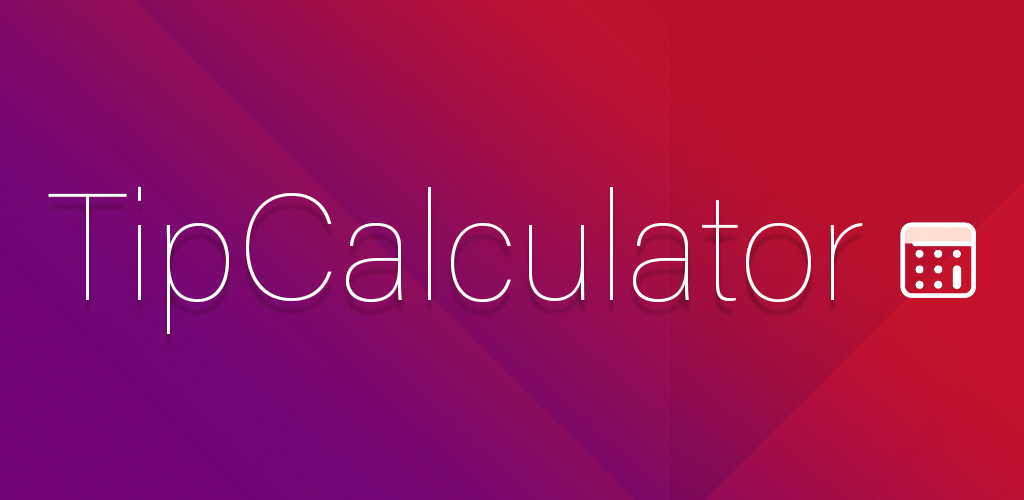
<style>
.page{position:relative;width:1024px;height:500px}
.page>*{position:absolute;margin:0}
.t1{font:150px "AcuminPro-Thin";color:#ffffff}
</style>
<div class="page">
<p class="t1" style="left:48px;top:186px;width:815px;height:148px">TipCalculator</p>
</div>
